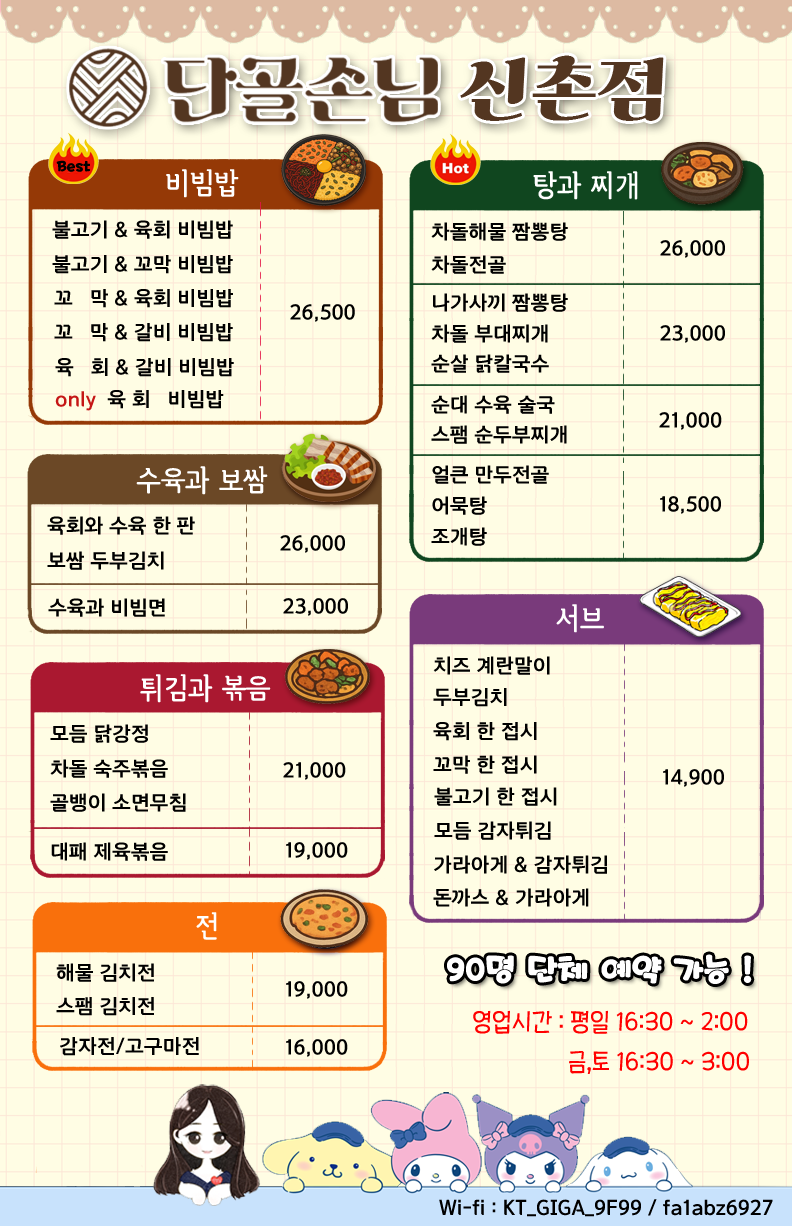
<style>
.page{position:relative;width:792px;height:1226px;background:#fffde4}
.page>*{position:absolute;margin:0}
.t1{font:70px "ghanachoco";color:#533621}
.t2{font:13px "KoreanPODG-R";color:#000000}
.t3{font:30px "Pix_HeummTalnemogulim162";color:#ffffff}
.t4{font:20px "ELANDChoiceB";color:#000000}
.t5{font:20px "ELANDChoiceB";color:#c51616}
.t6{font:30px "KoreanPODG-R";color:#ffffff}
.t7{font:26px "THEMiss";color:#ff0000}
</style>
<div class="page">
<p class="t1" style="left:460px;top:55px;width:204px;height:66px">신촌점</p>
<p class="t2" style="left:56px;top:160px;width:34px;height:12px">Best</p>
<p class="t3" style="left:166px;top:169px;width:73px;height:29px">비빔밥</p>
<p class="t3" style="left:533px;top:171px;width:105px;height:29px">탕과 찌개</p>
<p class="t4" style="left:52px;top:220px;width:181px;height:19px">불고기 &amp; 육회 비빔밥</p>
<p class="t4" style="left:431px;top:222px;width:137px;height:19px">차돌해물 짬뽕탕</p>
<p class="t4" style="left:660px;top:240px;width:65px;height:18px">26,000</p>
<p class="t4" style="left:52px;top:255px;width:181px;height:19px">불고기 &amp; 꼬막 비빔밥</p>
<p class="t4" style="left:431px;top:255px;width:75px;height:19px">차돌전골</p>
<p class="t4" style="left:54px;top:289px;width:179px;height:19px">꼬   막 &amp; 육회 비빔밥</p>
<p class="t4" style="left:433px;top:293px;width:135px;height:19px">나가사끼 짬뽕탕</p>
<p class="t4" style="left:290px;top:304px;width:65px;height:18px">26,500</p>
<p class="t4" style="left:54px;top:323px;width:179px;height:19px">꼬   막 &amp; 갈비 비빔밥</p>
<p class="t4" style="left:431px;top:324px;width:117px;height:19px">차돌 부대찌개</p>
<p class="t4" style="left:660px;top:325px;width:65px;height:18px">23,000</p>
<p class="t4" style="left:55px;top:358px;width:179px;height:19px">육   회 &amp; 갈비 비빔밥</p>
<p class="t4" style="left:431px;top:354px;width:118px;height:19px">순살 닭칼국수</p>
<p class="t4" style="left:55px;top:390px;width:169px;height:21px"><span class="t5">only</span>  육 회   비빔밥</p>
<p class="t4" style="left:431px;top:395px;width:124px;height:19px">순대 수육 술국</p>
<p class="t4" style="left:659px;top:412px;width:63px;height:18px">21,000</p>
<p class="t4" style="left:431px;top:425px;width:136px;height:19px">스팸 순두부찌개</p>
<p class="t3" style="left:136px;top:466px;width:132px;height:29px">수육과 보쌈</p>
<p class="t4" style="left:432px;top:465px;width:117px;height:19px">얼큰 만두전골</p>
<p class="t4" style="left:432px;top:496px;width:55px;height:19px">어묵탕</p>
<p class="t4" style="left:660px;top:496px;width:61px;height:18px">18,500</p>
<p class="t4" style="left:47px;top:516px;width:148px;height:19px">육회와 수육 한 판</p>
<p class="t4" style="left:431px;top:527px;width:56px;height:19px">조개탕</p>
<p class="t4" style="left:280px;top:535px;width:65px;height:18px">26,000</p>
<p class="t4" style="left:47px;top:551px;width:117px;height:19px">보쌈 두부김치</p>
<p class="t4" style="left:48px;top:598px;width:117px;height:19px">수육과 비빔면</p>
<p class="t4" style="left:283px;top:598px;width:65px;height:18px">23,000</p>
<p class="t3" style="left:556px;top:604px;width:48px;height:29px">서브</p>
<p class="t4" style="left:433px;top:656px;width:117px;height:19px">치즈 계란말이</p>
<p class="t3" style="left:140px;top:674px;width:131px;height:29px">튀김과 볶음</p>
<p class="t4" style="left:433px;top:688px;width:74px;height:19px">두부김치</p>
<p class="t4" style="left:50px;top:724px;width:98px;height:19px">모듬 닭강정</p>
<p class="t4" style="left:433px;top:722px;width:104px;height:19px">육회 한 접시</p>
<p class="t4" style="left:50px;top:759px;width:118px;height:19px">차돌 숙주볶음</p>
<p class="t4" style="left:433px;top:755px;width:104px;height:19px">꼬막 한 접시</p>
<p class="t4" style="left:283px;top:762px;width:63px;height:18px">21,000</p>
<p class="t4" style="left:663px;top:769px;width:61px;height:18px">14,900</p>
<p class="t4" style="left:50px;top:793px;width:136px;height:19px">골뱅이 소면무침</p>
<p class="t4" style="left:434px;top:787px;width:123px;height:19px">불고기 한 접시</p>
<p class="t4" style="left:434px;top:821px;width:117px;height:19px">모듬 감자튀김</p>
<p class="t4" style="left:51px;top:842px;width:117px;height:19px">대패 제육볶음</p>
<p class="t4" style="left:286px;top:842px;width:62px;height:18px">19,000</p>
<p class="t4" style="left:434px;top:855px;width:173px;height:19px">가라아게 &amp; 감자튀김</p>
<p class="t4" style="left:433px;top:888px;width:156px;height:19px">돈까스 &amp; 가라아게</p>
<p class="t3" style="left:196px;top:912px;width:21px;height:28px">전</p>
<p class="t4" style="left:56px;top:963px;width:98px;height:19px">해물 김치전</p>
<p class="t6" style="left:447px;top:954px;width:305px;height:30px">90명 단체 예약 가능 !</p>
<p class="t4" style="left:286px;top:981px;width:62px;height:18px">19,000</p>
<p class="t4" style="left:56px;top:997px;width:98px;height:19px">스팸 김치전</p>
<p class="t7" style="left:473px;top:1010px;width:275px;height:24px">영업시간 : 평일 16:30 ~ 2:00</p>
<p class="t4" style="left:60px;top:1037px;width:139px;height:19px">감자전/고구마전</p>
<p class="t4" style="left:286px;top:1039px;width:62px;height:18px">16,000</p>
<p class="t7" style="left:569px;top:1051px;width:180px;height:23px">금,토 16:30 ~ 3:00</p>
<p class="t4" style="left:439px;top:1199px;width:334px;height:18px">Wi-fi : KT_GIGA_9F99 / fa1abz6927</p>
</div>
